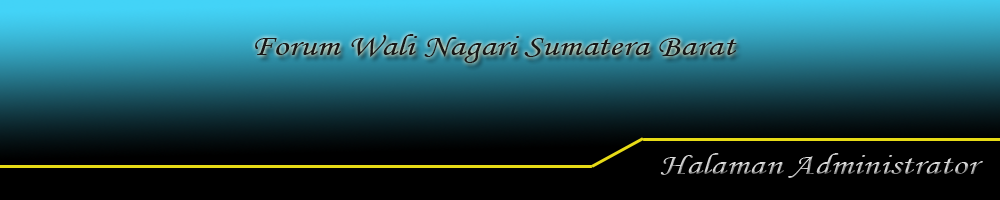
<style>
.page{position:relative;width:1000px;height:200px;background:#000000}
.page>*{position:absolute;margin:0}
.t1{font:30px "MonotypeCorsiva";color:#181818;scale:1.25 1}
.t2{font:30px "MonotypeCorsiva";scale:1.25 1}
</style>
<div class="page">
<p class="t1" style="left:255px;top:34px;width:482px;height:29px">Forum Wali Nagari Sumatera Barat</p>
<p class="t2" style="left:660px;top:153px;width:323px;height:25px">Halaman Administrator</p>
</div>
